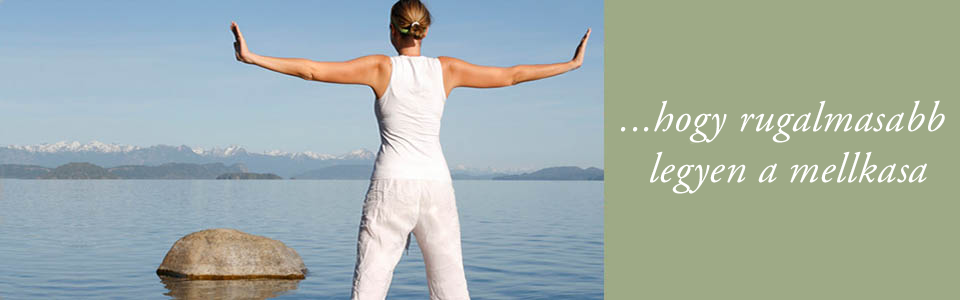
<style>
.page{position:relative;width:960px;height:300px;background:#9eaa86}
.page>*{position:absolute;margin:0}
.t1{font:42.4px "AGaramond-Italic";letter-spacing:0.015em;color:#ffffff}
</style>
<div class="page">
<p class="t1" style="left:621px;top:100px;width:324px;height:94px;text-align:center">...hogy rugalmasabb<br> legyen a mellkasa</p>
</div>
